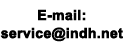
<style>
.page{position:relative;width:125px;height:50px;background:#ffffff}
.page>*{position:absolute;margin:0}
.t1{font:14px/18px "Arial-BoldMT";color:#000000;font-weight:bold}
</style>
<div class="page">
<p class="t1" style="left:0px;top:9px;width:123px;height:33px;text-align:center">E-mail:<br>service@indh.net</p>
</div>
